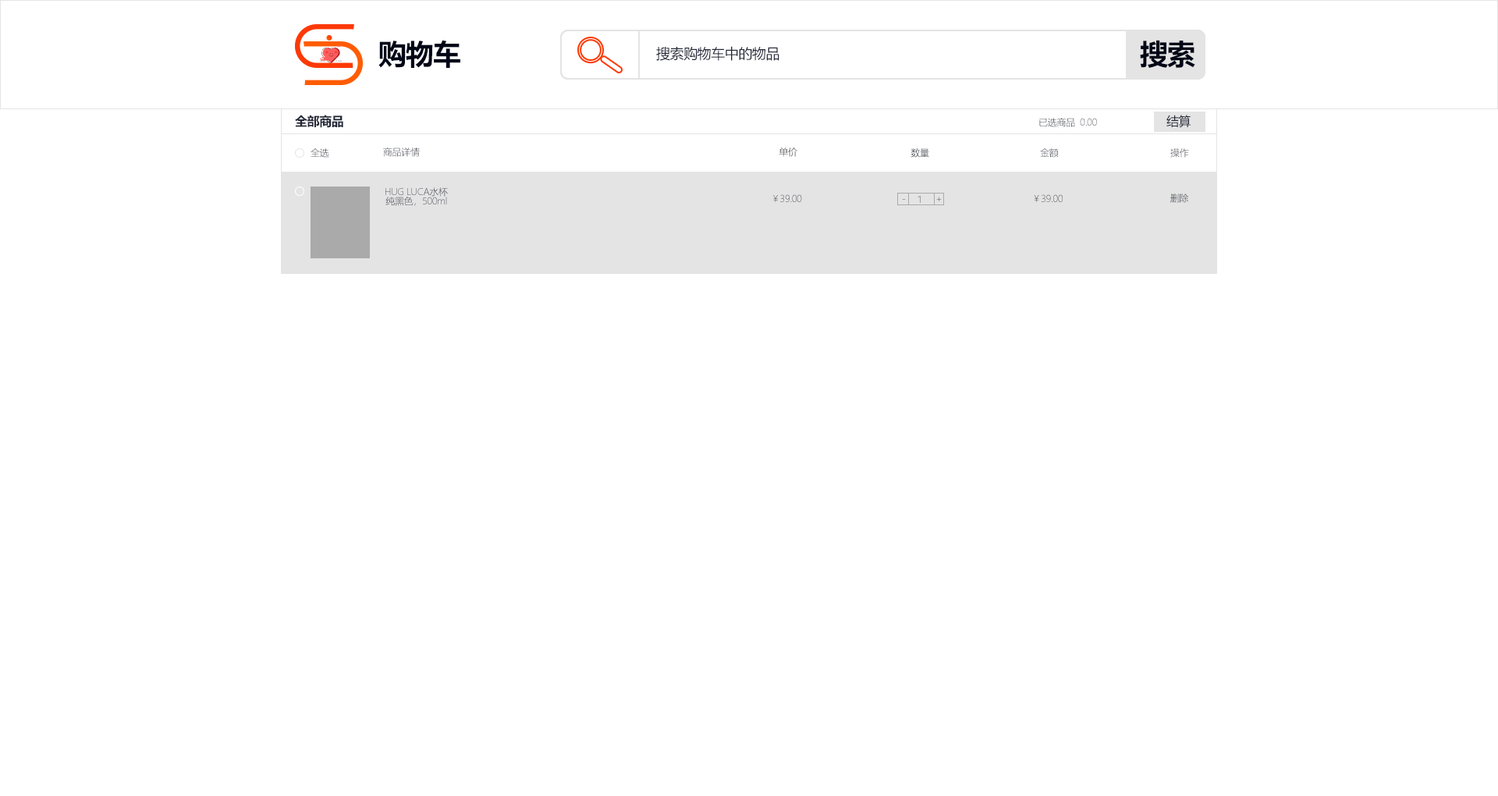
<style>
.page{position:relative;width:1498px;height:796px;background:#ffffff}
.page>*{position:absolute;margin:0}
.t1{font:28.1px "MicrosoftYaHei-Bold";letter-spacing:-0.024em;color:#010717}
.t2{font:14px "MicrosoftYaHei";letter-spacing:-0.024em;color:#242938}
.t3{font:12.5px "MicrosoftYaHei-Bold";letter-spacing:-0.024em;color:#242938}
.t4{font:9.4px "MicrosoftYaHeiLight";letter-spacing:-0.024em}
.t5{font:12.5px "MicrosoftYaHei";letter-spacing:-0.024em;color:#242938}
.t6{font:9.4px "MicrosoftYaHeiLight";letter-spacing:-0.024em;color:#242938}
</style>
<div class="page">
<p class="t1" style="left:378px;top:40px;width:82px;height:28px">购物车</p>
<p class="t1" style="left:1140px;top:40px;width:55px;height:28px">搜索</p>
<p class="t2" style="left:656px;top:46px;width:124px;height:15px">搜索购物车中的物品</p>
<p class="t3" style="left:295px;top:115px;width:48px;height:13px">全部商品</p>
<p class="t4" style="left:1039px;top:118px;width:58px;height:9px">已选商品  0.00</p>
<p class="t5" style="left:1167px;top:115px;width:24px;height:13px">结算</p>
<p class="t4" style="left:311px;top:148px;width:18px;height:10px">全选</p>
<p class="t4" style="left:383px;top:147px;width:37px;height:10px">商品详情</p>
<p class="t4" style="left:779px;top:147px;width:18px;height:10px">单价</p>
<p class="t4" style="left:911px;top:148px;width:18px;height:10px">数量</p>
<p class="t4" style="left:1040px;top:148px;width:19px;height:10px">金额</p>
<p class="t4" style="left:1170px;top:148px;width:19px;height:10px">操作</p>
<p class="t6" style="left:385px;top:187px;width:63px;height:10px">HUG LUCA水杯</p>
<p class="t4" style="left:385px;top:197px;width:62px;height:9px">纯黑色，500ml</p>
<p class="t4" style="left:773px;top:194px;width:29px;height:8px">￥39.00</p>
<p class="t4" style="left:918px;top:195px;width:3px;height:8px">1</p>
<p class="t4" style="left:936px;top:197px;width:6px;height:4px">+</p>
<p class="t4" style="left:1034px;top:194px;width:29px;height:8px">￥39.00</p>
<p class="t4" style="left:1170px;top:194px;width:18px;height:9px">删除</p>
<p class="t4" style="left:902px;top:199px;width:4px;height:1px">-</p>
</div>
